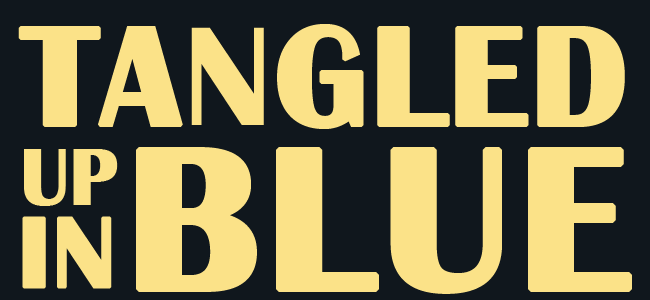
<style>
.page{position:relative;width:650px;height:300px;background:#10171d}
.page>*{position:absolute;margin:0}
.t1{font:145.8px "BritannicBold";color:#fbe288;font-weight:bold}
.t2{font:83.3px "BritannicBold";color:#fbe288;font-weight:bold;scale:0.94 1}
.t3{font:208.3px "BritannicBold";letter-spacing:0.02em;color:#fbe288;font-weight:bold}
.t4{font:104.2px "BritannicBold";color:#fbe288;font-weight:bold}
</style>
<div class="page">
<p class="t1" style="left:18px;top:24px;width:607px;height:105px">TANGLED</p>
<p class="t2" style="left:24px;top:149px;width:94px;height:57px">UP</p>
<p class="t3" style="left:136px;top:147px;width:496px;height:147px">BLUE</p>
<p class="t4" style="left:22px;top:216px;width:90px;height:73px">IN</p>
</div>
